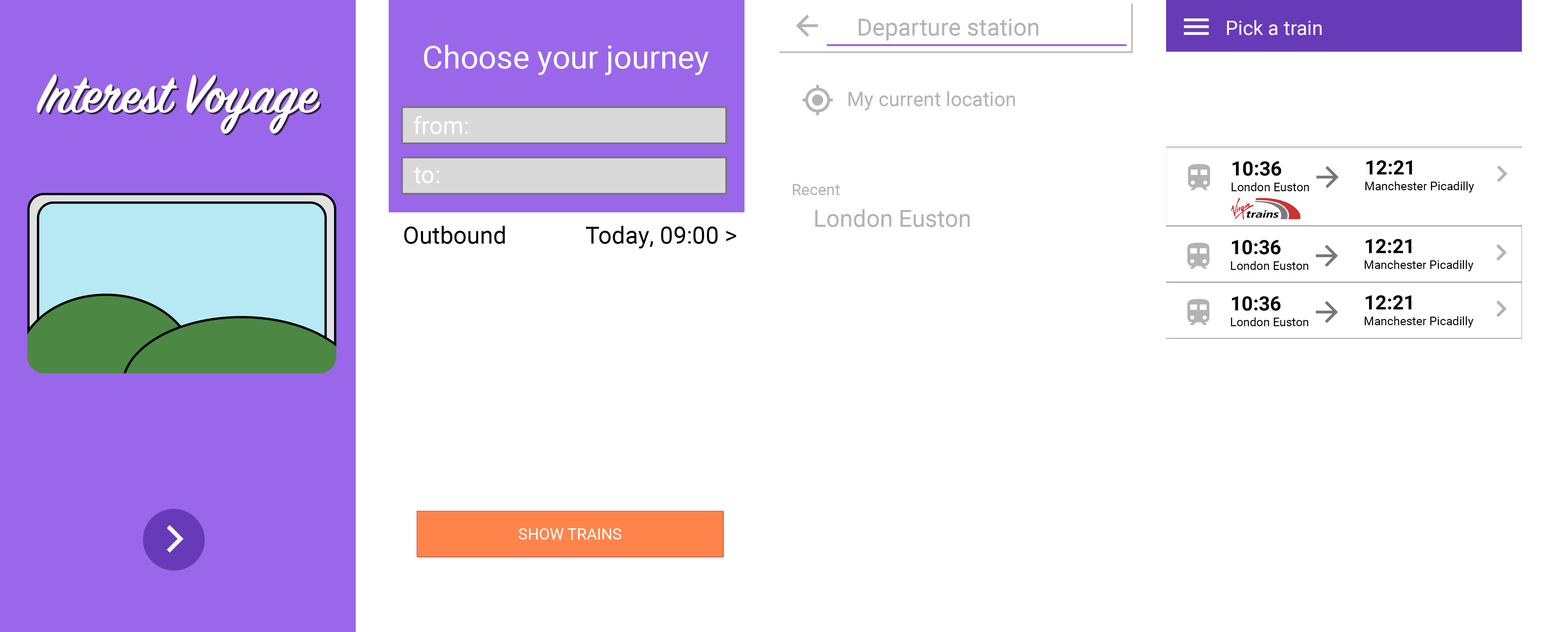
<style>
.page{position:relative;width:1568px;height:632px;background:#ffffff}
.page>*{position:absolute;margin:0}
.t1{font:23.7px "Roboto-Regular";color:#b4b2b2}
.t2{font:19.8px "Roboto-Regular";color:#ffffff}
.t3{font:31.6px "Roboto-Regular";color:#ffffff}
.t4{font:60px "SignPainter-HouseScriptSemibold";color:#ffffff}
.t5{font:19.8px "Roboto-Regular";color:#b4b2b2}
.t6{font:23.7px "Roboto-Regular";color:#ffffff}
.t7{font:19.8px "Roboto-Bold";color:#000000}
.t8{font:15.8px "Roboto-Regular";color:#b4b2b2}
.t9{font:11.9px "Roboto-Regular";color:#000000}
.t10{font:23.7px "Roboto-Regular";color:#000000}
.t11{font:15.8px "Roboto-Regular";color:#ffffff}
</style>
<div class="page">
<p class="t1" style="left:858px;top:19px;width:180px;height:22px">Departure station</p>
<p class="t2" style="left:1227px;top:20px;width:95px;height:15px">Pick a train</p>
<p class="t3" style="left:424px;top:45px;width:285px;height:30px">Choose your journey</p>
<p class="t4" style="left:37px;top:74px;width:283px;height:60px">Interest Voyage</p>
<p class="t5" style="left:849px;top:91px;width:166px;height:19px">My current location</p>
<p class="t6" style="left:414px;top:116px;width:54px;height:18px">from:</p>
<p class="t7" style="left:1232px;top:161px;width:49px;height:15px">10:36</p>
<p class="t7" style="left:1366px;top:160px;width:46px;height:15px">12:21</p>
<p class="t6" style="left:414px;top:168px;width:25px;height:15px">to:</p>
<p class="t8" style="left:793px;top:184px;width:47px;height:11px">Recent</p>
<p class="t9" style="left:1232px;top:182px;width:77px;height:9px">London Euston</p>
<p class="t9" style="left:1365px;top:182px;width:109px;height:11px">Manchester Picadilly</p>
<p class="t1" style="left:815px;top:209px;width:155px;height:18px">London Euston</p>
<p class="t10" style="left:404px;top:226px;width:101px;height:18px">Outbound</p>
<p class="t10" style="left:586px;top:226px;width:150px;height:23px">Today, 09:00 &gt;</p>
<p class="t7" style="left:1232px;top:240px;width:49px;height:15px">10:36</p>
<p class="t7" style="left:1365px;top:239px;width:47px;height:14px">12:21</p>
<p class="t9" style="left:1231px;top:261px;width:77px;height:9px">London Euston</p>
<p class="t9" style="left:1365px;top:260px;width:108px;height:11px">Manchester Picadilly</p>
<p class="t7" style="left:1232px;top:296px;width:49px;height:15px">10:36</p>
<p class="t7" style="left:1365px;top:295px;width:47px;height:15px">12:21</p>
<p class="t9" style="left:1231px;top:318px;width:77px;height:8px">London Euston</p>
<p class="t9" style="left:1365px;top:317px;width:108px;height:11px">Manchester Picadilly</p>
<p class="t11" style="left:518px;top:529px;width:103px;height:11px">SHOW TRAINS</p>
</div>
